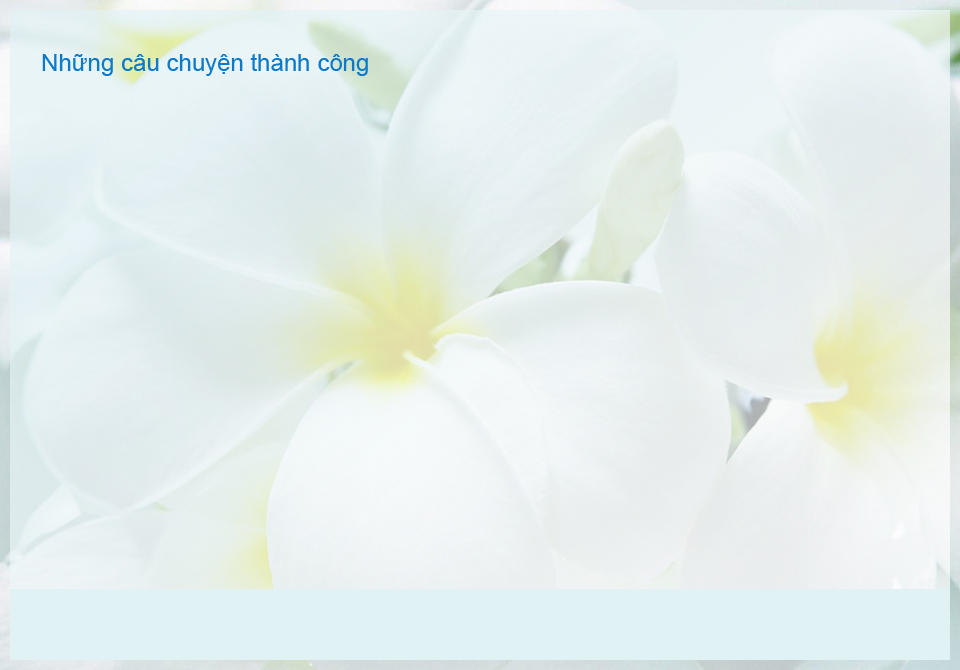
<style>
.page{position:relative;width:960px;height:670px}
.page>*{position:absolute;margin:0}
.t1{font:24px "ArialMT";color:#0d79c9}
</style>
<div class="page">
<p class="t1" style="left:42px;top:53px;width:326px;height:23px">Những câu chuyện thành công</p>
</div>
